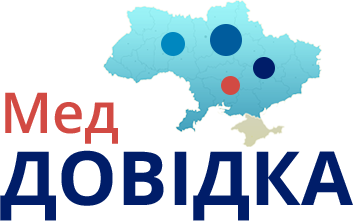
<style>
.page{position:relative;width:354px;height:221px;background:#ffffff}
.page>*{position:absolute;margin:0}
.t1{font:74.9px/56.2px "OpenSans-Bold";color:#001d69;text-transform:uppercase}
.t2{font:56.2px/56.2px "OpenSans-Semibold";color:#d24a43}
</style>
<div class="page">
<p class="t1" style="left:0px;top:92px;width:353px;height:129px"><span class="t2">Мед<br></span>Довідка</p>
</div>
